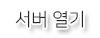
<style>
.page{position:relative;width:100px;height:38px;background:#ffffff}
.page>*{position:absolute;margin:0}
.t1{font:18px "NanumSquareL";color:#000000}
</style>
<div class="page">
<p class="t1" style="left:15px;top:10px;width:68px;height:18px">서버 열기</p>
</div>
